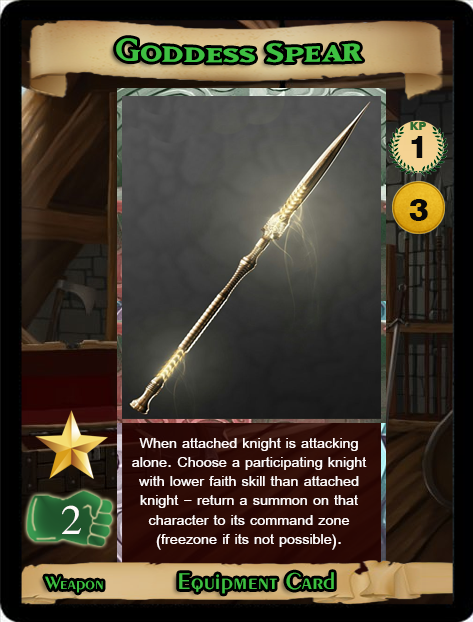
<style>
.page{position:relative;width:473px;height:622px}
.page>*{position:absolute;margin:0}
.t1{font:40px "MatrixBoldSmallCaps";color:#3ec041;scale:1.06 1}
.t2{font:32px "Swiss721BT-Heavy";color:#090909}
.t3{font:32px "Swiss721BT-Heavy";color:#090909;scale:1.05 1}
.t4{font:16px "SimplifiedArabic";color:#fef9f9}
.t5{font:40px "SimplifiedArabic";color:#fef9f9;scale:1.05 1}
.t6{font:18.7px "Exotic350BT-DemiBold";color:#3ec041;scale:1.06 1}
.t7{font:24px "Exotic350BT-DemiBold";color:#3ec041;scale:1.06 1}
</style>
<div class="page">
<p class="t1" style="left:116px;top:38px;width:247px;height:25px">Goddess Spear</p>
<p class="t2" style="left:411px;top:136px;width:12px;height:22px">1</p>
<p class="t3" style="left:409px;top:199px;width:19px;height:22px">3</p>
<p class="t4" style="left:132px;top:438px;width:235px;height:112px;text-align:center">When attached knight is attacking alone. Choose a participating knight with lower faith skill than attached knight - return a summon on that character to its command zone (freezone if its not possible).</p>
<p class="t5" style="left:62px;top:505px;width:19px;height:29px">2</p>
<p class="t6" style="left:45px;top:576px;width:58px;height:17px">Weapon</p>
<p class="t7" style="left:179px;top:572px;width:155px;height:22px">Equipment Card</p>
</div>
